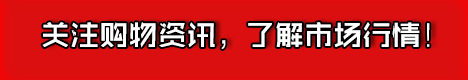
<style>
.page{position:relative;width:468px;height:80px;background:#db0f0f}
.page>*{position:absolute;margin:0}
.t1{font:30px "ZHSCNMT--GBK1-0";color:#ffffff}
</style>
<div class="page">
<p class="t1" style="left:42px;top:22px;width:388px;height:27px">关注购物资讯，了解市场行情！</p>
</div>
